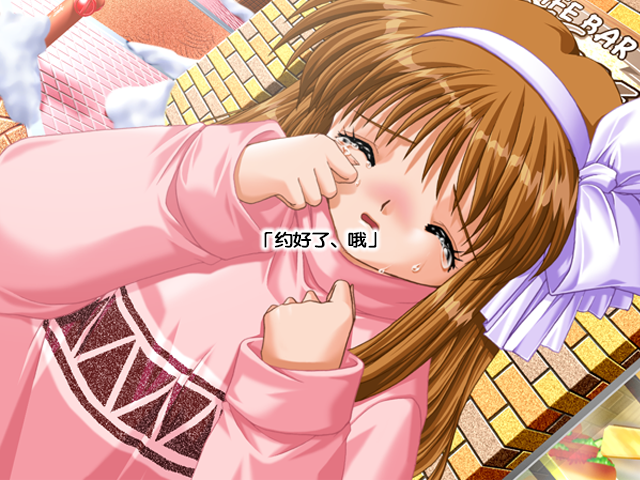
<style>
.page{position:relative;width:640px;height:480px}
.page>*{position:absolute;margin:0}
.t1{font:17.6px "FZY4K--GBK1-0";letter-spacing:-0.08em;color:#000000;scale:1.14 1}
</style>
<div class="page">
<p class="t1" style="left:264px;top:231px;width:113px;height:17px">「约好了、哦」</p>
</div>
